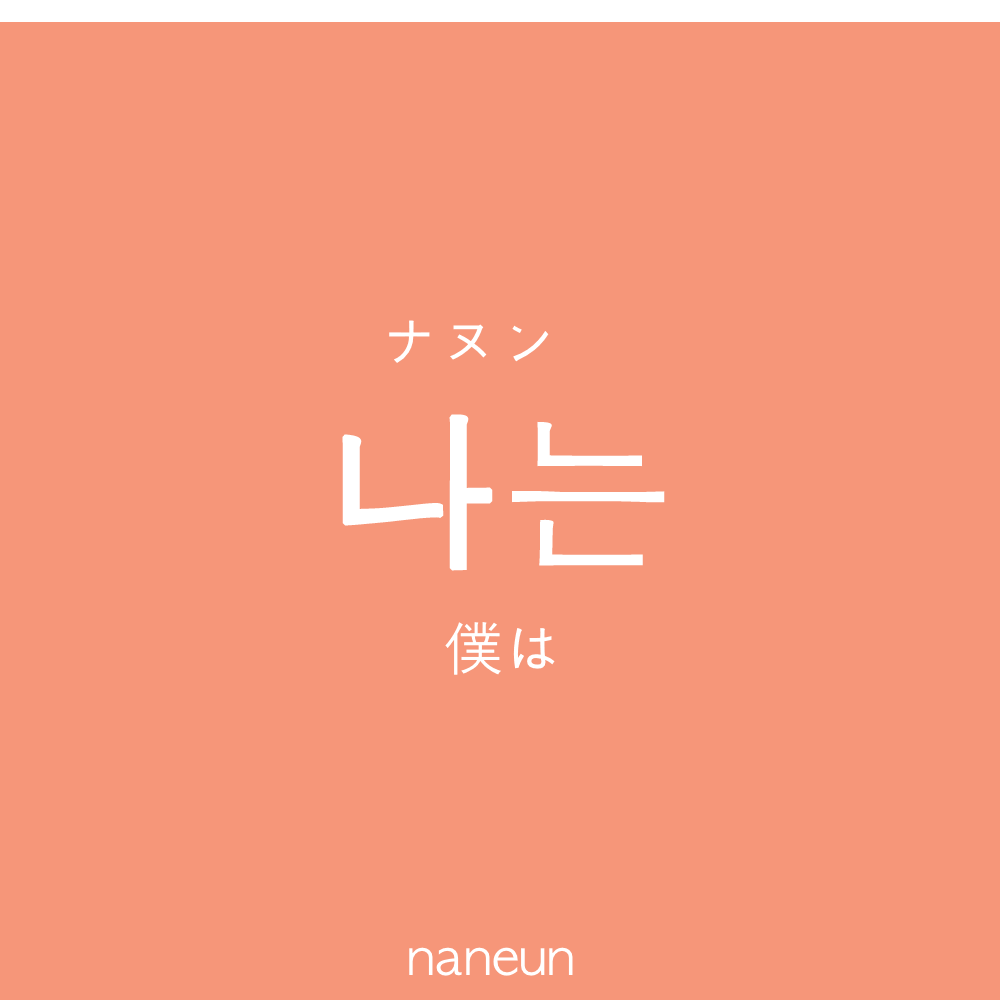
<style>
.page{position:relative;width:1000px;height:1000px;background:#f69679}
.page>*{position:absolute;margin:0}
.t1{font:60px "AppleGothic";color:#ffffff}
.t2{font:170px "AppleGothic";color:#ffffff;font-weight:bold}
.t3{font:50px "AppleGothic";color:#ffffff}
</style>
<div class="page">
<p class="t1" style="left:389px;top:320px;width:160px;height:43px">ナヌン</p>
<p class="t2" style="left:342px;top:414px;width:323px;height:157px">나는</p>
<p class="t1" style="left:445px;top:622px;width:110px;height:53px">僕は</p>
<p class="t3" style="left:409px;top:947px;width:164px;height:29px">naneun</p>
</div>
